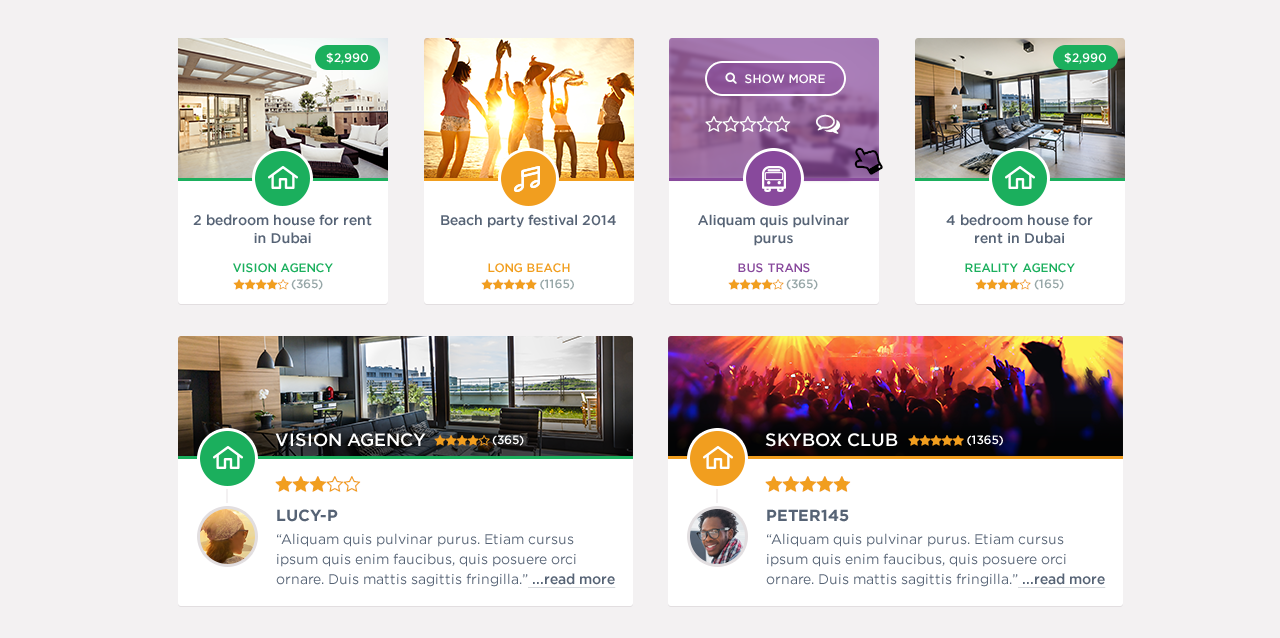
<style>
.page{position:relative;width:1280px;height:638px;background:#f3f1f2}
.page>*{position:absolute;margin:0}
.t1{font:12px "Gotham-Medium";color:#ffffff;text-transform:uppercase}
.t2{font:14px/18px "Gotham-Medium";color:#566375}
.t3{font:14px "Gotham-Medium";color:#566375}
.t4{font:12px "Gotham-Medium";color:#1baf5d;text-transform:uppercase}
.t5{font:12px "Gotham-Medium";color:#f19e1f;text-transform:uppercase}
.t6{font:12px "Gotham-Medium";color:#88499c;text-transform:uppercase}
.t7{font:12px "Gotham-Medium";color:#96a6a7;text-transform:uppercase}
.t8{font:18px "Gotham-Medium";color:#ffffff;text-transform:uppercase}
.t9{font:16px "Gotham-Bold";color:#566375;text-transform:uppercase}
.t10{font:14px/20px "Gotham-Book";color:#566375}
.t11{font:14px/20px "Gotham-Medium";color:#566375;text-decoration:underline}
</style>
<div class="page">
<p class="t1" style="left:326px;top:52px;width:42px;height:12px">$2,990</p>
<p class="t1" style="left:1064px;top:52px;width:42px;height:12px">$2,990</p>
<p class="t1" style="left:745px;top:74px;width:80px;height:10px">Show more</p>
<p class="t2" style="left:193px;top:214px;width:179px;height:30px;text-align:center">2 bedroom house for rent in Dubai</p>
<p class="t3" style="left:441px;top:214px;width:175px;height:14px">Beach party festival 2014</p>
<p class="t2" style="left:698px;top:214px;width:151px;height:32px;text-align:center">Aliquam quis pulvinar purus</p>
<p class="t2" style="left:946px;top:214px;width:147px;height:30px;text-align:center">4 bedroom house for rent in Dubai</p>
<p class="t4" style="left:233px;top:263px;width:100px;height:10px">Vision Agency</p>
<p class="t5" style="left:488px;top:263px;width:82px;height:10px">Long beach</p>
<p class="t6" style="left:738px;top:263px;width:72px;height:10px">Bus Trans</p>
<p class="t4" style="left:965px;top:263px;width:110px;height:10px">reality Agency</p>
<p class="t7" style="left:291px;top:279px;width:32px;height:11px">(365)</p>
<p class="t7" style="left:540px;top:279px;width:34px;height:11px">(1165)</p>
<p class="t7" style="left:786px;top:279px;width:32px;height:11px">(365)</p>
<p class="t7" style="left:1034px;top:279px;width:30px;height:11px">(165)</p>
<p class="t8" style="left:275px;top:433px;width:151px;height:14px">Vision agency</p>
<p class="t1" style="left:492px;top:435px;width:32px;height:11px">(365)</p>
<p class="t8" style="left:765px;top:433px;width:133px;height:14px">Skybox club</p>
<p class="t1" style="left:967px;top:435px;width:36px;height:11px">(1365)</p>
<p class="t9" style="left:277px;top:509px;width:61px;height:13px">Lucy-P</p>
<p class="t9" style="left:767px;top:509px;width:82px;height:13px">Peter145</p>
<p class="t10" style="left:276px;top:533px;width:340px;height:55px">“Aliquam quis pulvinar purus. Etiam cursus ipsum quis enim faucibus, quis posuere orci ornare. Duis mattis sagittis fringilla.”<span class="t11"> ...read more</span></p>
<p class="t10" style="left:766px;top:533px;width:340px;height:55px">“Aliquam quis pulvinar purus. Etiam cursus ipsum quis enim faucibus, quis posuere orci ornare. Duis mattis sagittis fringilla.”<span class="t11"> ...read more</span></p>
</div>
